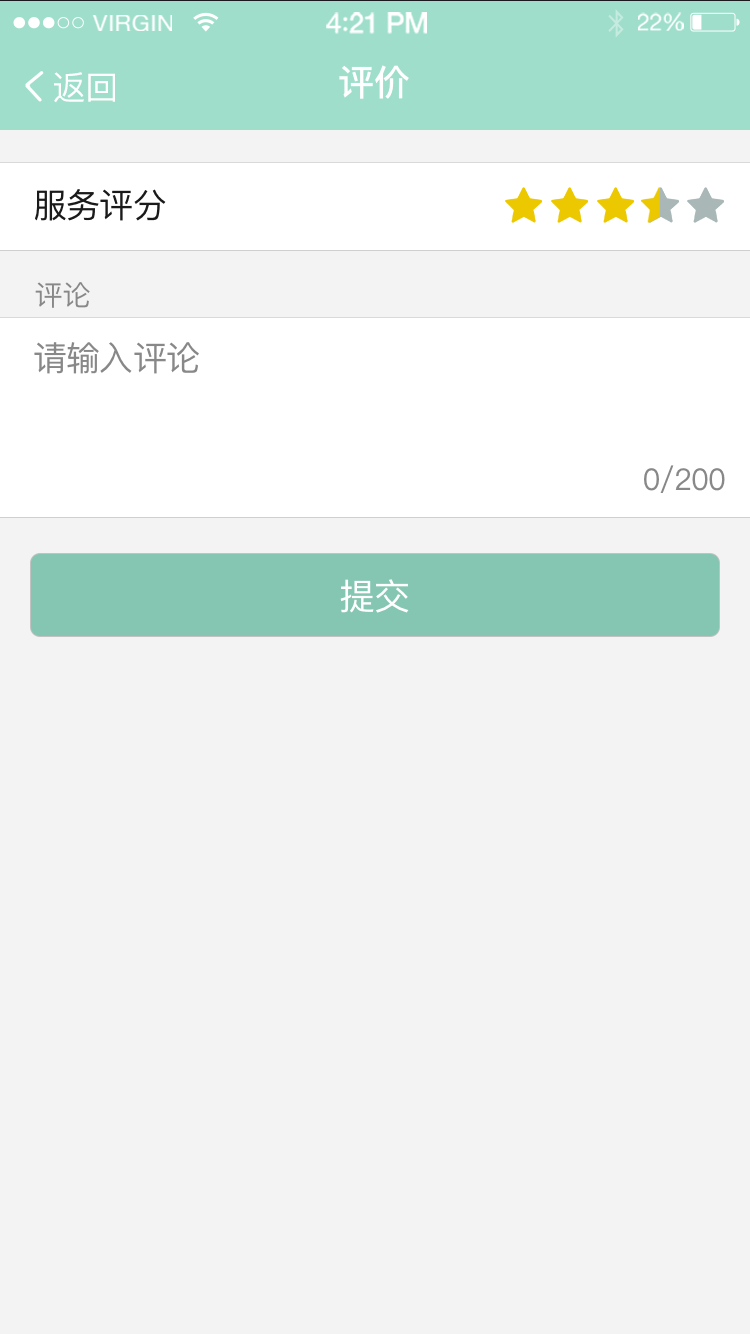
<style>
.page{position:relative;width:750px;height:1334px;background:#f3f3f3}
.page>*{position:absolute;margin:0}
.t1{font:23.4px "HelveticaNeue";letter-spacing:0.02em;color:#ffffff}
.t2{font:28.1px "HelveticaNeue-Medium";letter-spacing:-0.02em;color:#ffffff}
.t3{font:28.1px "Avenir-Medium";letter-spacing:-0.02em;color:#ffffff}
.t4{font:23.5px "HelveticaNeue";letter-spacing:-0.02em;color:#ffffff}
.t5{font:36px "PingFangSC-Medium";color:#ffffff}
.t6{font:33.3px "PingFangSC-Medium";color:#ffffff}
.t7{font:34px "PingFangSC-Regular";letter-spacing:-0.026em;color:#1a1a1a}
.t8{font:28px "PingFangSC-Regular";color:#888888}
.t9{font:34px "PingFangSC-Regular";letter-spacing:-0.026em;color:#888888}
.t10{font:30px "PingFangSC-Regular";letter-spacing:-0.026em;color:#888888}
.t11{font:36px "PingFangSC-Regular";letter-spacing:-0.026em;color:#ffffff}
</style>
<div class="page">
<p class="t1" style="left:91px;top:15px;width:81px;height:16px">VIRGIN</p>
<p class="t2" style="left:326px;top:12px;width:101px;height:22px">4<span class="t3">:</span>21 PM</p>
<p class="t4" style="left:638px;top:12px;width:46px;height:19px">22%</p>
<p class="t5" style="left:339px;top:65px;width:70px;height:34px">评价</p>
<p class="t6" style="left:54px;top:72px;width:61px;height:31px">返回</p>
<p class="t7" style="left:35px;top:189px;width:131px;height:32px">服务评分</p>
<p class="t8" style="left:35px;top:282px;width:55px;height:26px">评论</p>
<p class="t9" style="left:34px;top:342px;width:165px;height:32px">请输入评论</p>
<p class="t10" style="left:644px;top:465px;width:81px;height:28px">0/200</p>
<p class="t11" style="left:340px;top:579px;width:69px;height:34px">提交</p>
</div>
